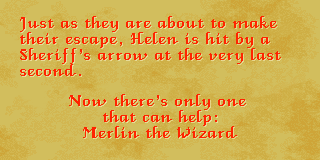
<style>
.page{position:relative;width:320px;height:160px;background:#d2be5d}
.page>*{position:absolute;margin:0}
.t1{font:20px/16px "VeniceClassic";letter-spacing:0.05em;color:#ff2400}
</style>
<div class="page">
<p class="t1" style="left:20px;top:16px;width:261px;height:60px">Just as they are about to make<br>their escape, Helen is hit by a<br>Sheriff’s arrow at the very last<br>second.</p>
<p class="t1" style="left:69px;top:94px;width:177px;height:44px;text-align:center">Now there’s only one <br>that can help:<br>Merlin the Wizard</p>
</div>
